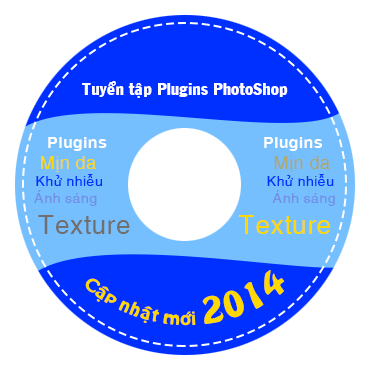
<style>
.page{position:relative;width:369px;height:369px;background:#ffffff}
.page>*{position:absolute;margin:0}
.t1{font:17.3px "VNI-Franko";color:#ffffff}
.t2{font:14px "VNI-Helve";color:#0030ff}
.t3{font:12px "VNI-Helve";color:#ffd802}
.t4{font:16px "VNI-Helve-Bold";color:#fefefe}
.t5{font:18px "VNI-Helve";color:#ffd802}
.t6{font:14px "VNI-Helve";color:#728fe4}
.t7{font:26px "VNI-Helve";color:#726e6e}
.t8{font:18px "VNI-Helve";color:#b0a56b}
.t9{font:26px "VNI-Helve";color:#ffd802}
.t10{font:15.8px "VNI-Hobo";color:#ffd802}
.t11{font:31.7px "VNI-Hobo";color:#ffd802}
</style>
<div class="page">
<p class="t1" style="left:82px;top:81px;width:206px;height:17px">Tuyeån taäp Plugins PhotoShop</p>
<p class="t2" style="left:34px;top:137px;width:96px;height:97px"><span class="t3"><br><br><br><br><br><br></span><span class="t4">Plugins <br></span><span class="t5">Mòn da<br></span>Khöû nhieãu<br><span class="t6">AÙnh saùng<br></span><span class="t7">Texture</span></p>
<p class="t2" style="left:238px;top:137px;width:97px;height:97px"><span class="t3"><br><br><br><br><br><br></span><span class="t4">Plugins <br></span><span class="t8">Mòn da<br></span>Khöû nhieãu<br><span class="t6">AÙnh saùng<br></span><span class="t9">Texture</span></p>
<p class="t10" style="left:85px;top:270px;width:200px;height:56px">Caäp nhaät môùi <span class="t11">2014</span></p>
</div>
